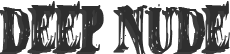
<style>
.page{position:relative;width:230px;height:54px;background:#ffffff}
.page>*{position:absolute;margin:0}
.t1{font:22.9px "BloodCrow";color:#2e2e2e;scale:0.58 1}
</style>
<div class="page">
<p class="t1" style="left:2px;top:1px;width:228px;height:53px">deep nude</p>
</div>
